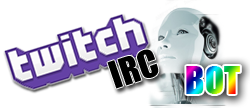
<style>
.page{position:relative;width:250px;height:108px;background:#ffffff}
.page>*{position:absolute;margin:0}
.t1{font:35px "Impact";color:#000000}
.t2{font:35px "Impact"}
</style>
<div class="page">
<p class="t1" style="left:107px;top:49px;width:52px;height:40px;rotate:-19deg">IRC</p>
<p class="t2" style="left:186px;top:66px;width:54px;height:28px">BOT</p>
</div>
